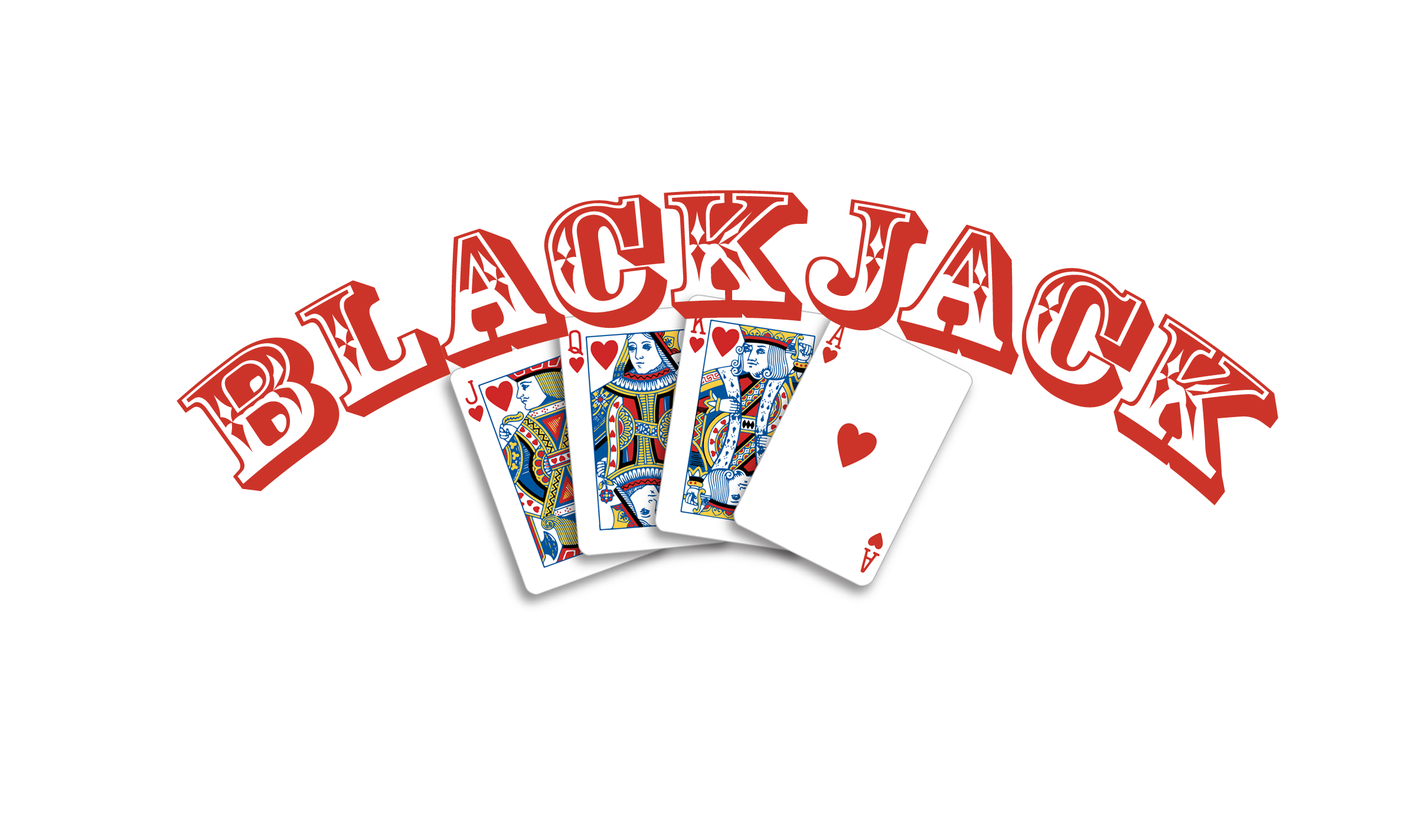
<style>
.page{position:relative;width:1420px;height:840px;background:#ffffff}
.page>*{position:absolute;margin:0}
.t1{font:177.1px "RosewoodStd-Regular";color:#cc3429}
</style>
<div class="page">
<p class="t1" style="left:177px;top:190px;width:1101px;height:315px">BlackJack</p>
</div>
